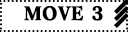
<style>
.page{position:relative;width:128px;height:32px;background:#ffffff}
.page>*{position:absolute;margin:0}
.t1{font:18px "EVA_Matisse_Classic-EB";color:#000000;font-weight:bold}
</style>
<div class="page">
<p class="t1" style="left:24px;top:6px;width:79px;height:15px">MOVE 3</p>
</div>
